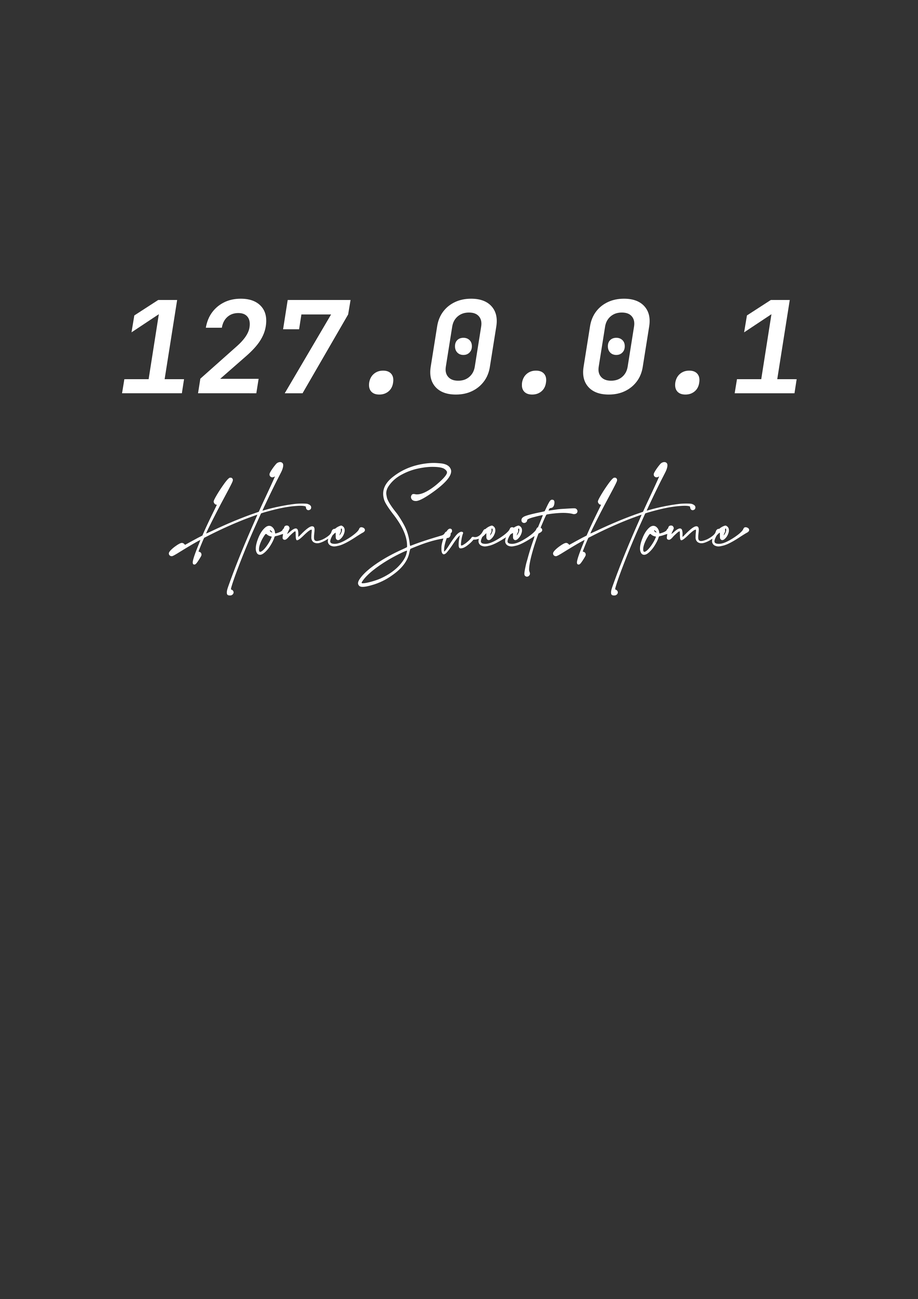
<style>
.page{position:relative;width:918px;height:1299px;background:#333333}
.page>*{position:absolute;margin:0}
.t1{font:127.9px "JetBrainsMono-BoldItalic";color:#ffffff}
.t2{font:127.5px "SouthamDemo";color:#ffffff}
</style>
<div class="page">
<p class="t1" style="left:122px;top:298px;width:675px;height:97px">127.0.0.1</p>
<p class="t2" style="left:169px;top:462px;width:580px;height:134px">Home Sweet Home</p>
</div>
